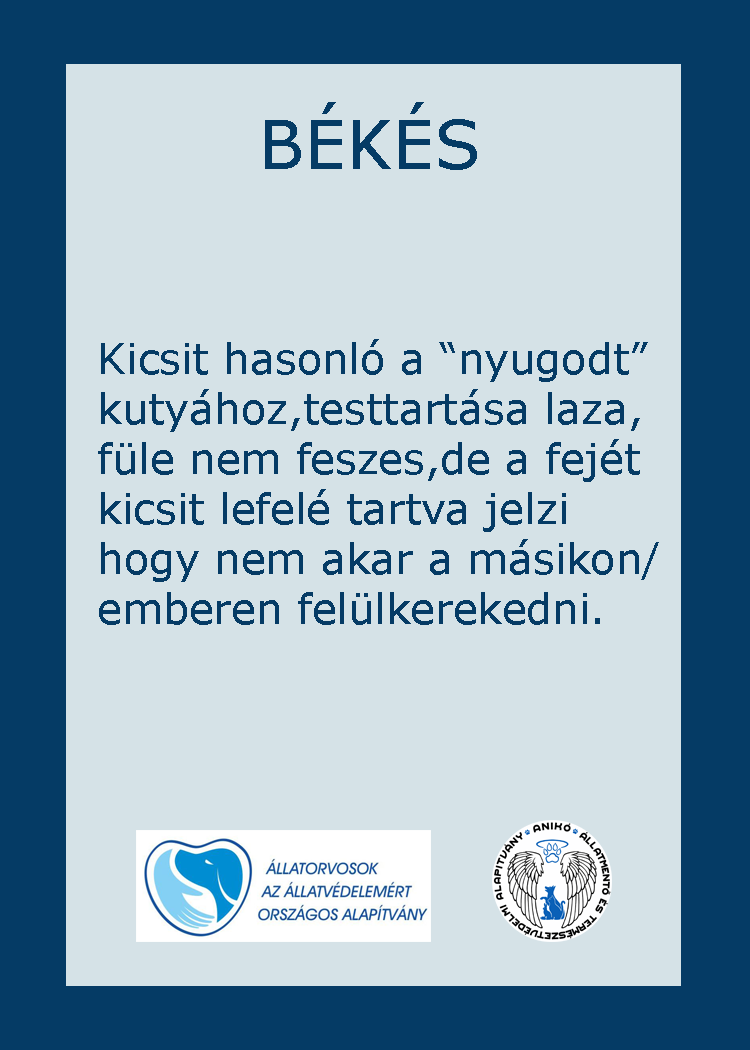
<style>
.page{position:relative;width:750px;height:1050px;background:#d5e2e7}
.page>*{position:absolute;margin:0}
.t1{font:66.7px "Verdana";color:#053b65}
.t2{font:66.7px "GravitateBRK";color:#053b65}
.t3{font:41.7px "Verdana";color:#053b65}
</style>
<div class="page">
<p class="t1" style="left:265px;top:102px;width:212px;height:68px"><span class="t2">         </span>BÉKÉS</p>
<p class="t3" style="left:98px;top:339px;width:561px;height:286px">Kicsit hasonló a “nyugodt”<br>kutyához,testtartása laza,<br>füle nem feszes,de a fejét<br>kicsit lefelé tartva jelzi<br>hogy nem akar a másikon/<br>emberen felülkerekedni.</p>
</div>
